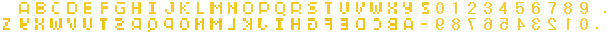
<style>
.page{position:relative;width:608px;height:32px;background:#ffffff}
.page>*{position:absolute;margin:0}
.t1{font:18.6px "04b03";color:#f3ca30;text-transform:uppercase}
.t2{font:18.6px "04b03";color:#f1c419;text-transform:uppercase}
</style>
<div class="page">
<p class="t1" style="left:19px;top:2px;width:10px;height:12px">A</p>
<p class="t1" style="left:36px;top:2px;width:10px;height:12px">B</p>
<p class="t1" style="left:52px;top:2px;width:7px;height:12px">C</p>
<p class="t1" style="left:67px;top:2px;width:10px;height:12px">D</p>
<p class="t1" style="left:84px;top:2px;width:7px;height:12px">E</p>
<p class="t1" style="left:101px;top:2px;width:7px;height:12px">F</p>
<p class="t1" style="left:115px;top:2px;width:10px;height:12px">G</p>
<p class="t1" style="left:132px;top:2px;width:9px;height:12px">H</p>
<p class="t1" style="left:149px;top:2px;width:7px;height:12px">i</p>
<p class="t1" style="left:165px;top:2px;width:9px;height:12px">J</p>
<p class="t1" style="left:180px;top:2px;width:9px;height:12px">K</p>
<p class="t1" style="left:197px;top:2px;width:7px;height:12px">L</p>
<p class="t1" style="left:210px;top:2px;width:12px;height:12px">M</p>
<p class="t1" style="left:228px;top:2px;width:9px;height:12px">N</p>
<p class="t1" style="left:243px;top:2px;width:10px;height:12px">O</p>
<p class="t1" style="left:259px;top:2px;width:10px;height:12px">p</p>
<p class="t1" style="left:275px;top:2px;width:10px;height:14px">Q</p>
<p class="t1" style="left:291px;top:2px;width:10px;height:12px">R</p>
<p class="t1" style="left:308px;top:2px;width:9px;height:12px">S</p>
<p class="t1" style="left:325px;top:2px;width:7px;height:12px">T</p>
<p class="t1" style="left:340px;top:2px;width:9px;height:12px">U</p>
<p class="t1" style="left:356px;top:2px;width:9px;height:12px">V</p>
<p class="t1" style="left:370px;top:2px;width:12px;height:12px">W</p>
<p class="t1" style="left:388px;top:2px;width:9px;height:12px">X</p>
<p class="t1" style="left:403px;top:2px;width:9px;height:12px">Y</p>
<p class="t1" style="left:422px;top:2px;width:7px;height:12px;rotate:180deg">Z</p>
<p class="t2" style="left:3px;top:18px;width:7px;height:12px">Z</p>
<p class="t2" style="left:20px;top:18px;width:9px;height:12px;rotate:180deg">Y</p>
<p class="t2" style="left:35px;top:18px;width:9px;height:12px;rotate:180deg">X</p>
<p class="t2" style="left:50px;top:18px;width:12px;height:12px;rotate:180deg">W</p>
<p class="t2" style="left:67px;top:18px;width:9px;height:12px;rotate:180deg">V</p>
<p class="t2" style="left:83px;top:18px;width:9px;height:12px;rotate:180deg">U</p>
<p class="t2" style="left:100px;top:18px;width:7px;height:12px;rotate:180deg">T</p>
<p class="t2" style="left:115px;top:18px;width:9px;height:12px;rotate:180deg">S</p>
<p class="t2" style="left:132px;top:18px;width:9px;height:12px;rotate:180deg">R</p>
<p class="t2" style="left:148px;top:18px;width:9px;height:14px;rotate:180deg">Q</p>
<p class="t2" style="left:164px;top:18px;width:9px;height:12px;rotate:180deg">p</p>
<p class="t2" style="left:180px;top:18px;width:9px;height:12px;rotate:180deg">O</p>
<p class="t2" style="left:195px;top:18px;width:9px;height:12px;rotate:180deg">N</p>
<p class="t2" style="left:210px;top:18px;width:12px;height:12px;rotate:180deg">M</p>
<p class="t2" style="left:228px;top:18px;width:7px;height:12px;rotate:180deg">L</p>
<p class="t2" style="left:243px;top:18px;width:9px;height:12px;rotate:180deg">K</p>
<p class="t2" style="left:258px;top:18px;width:9px;height:12px;rotate:180deg">J</p>
<p class="t2" style="left:276px;top:18px;width:7px;height:12px;rotate:180deg">i</p>
<p class="t2" style="left:291px;top:18px;width:9px;height:12px;rotate:180deg">H</p>
<p class="t2" style="left:308px;top:18px;width:9px;height:12px;rotate:180deg">G</p>
<p class="t2" style="left:325px;top:18px;width:7px;height:12px;rotate:180deg">F</p>
<p class="t2" style="left:341px;top:18px;width:7px;height:12px;rotate:180deg">E</p>
<p class="t2" style="left:356px;top:18px;width:9px;height:12px;rotate:180deg">D</p>
<p class="t2" style="left:374px;top:18px;width:7px;height:12px;rotate:180deg">C</p>
<p class="t2" style="left:388px;top:18px;width:9px;height:12px;rotate:180deg">B</p>
<p class="t2" style="left:404px;top:18px;width:9px;height:12px;rotate:180deg">A</p>
</div>
